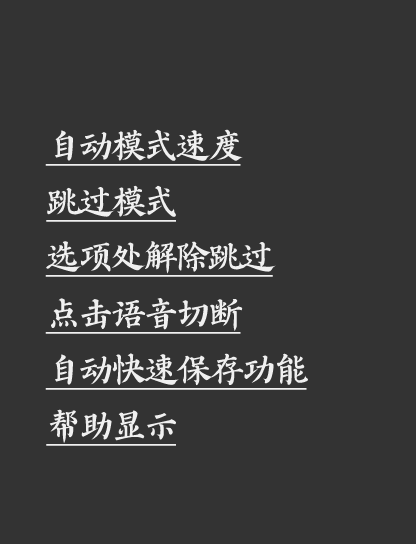
<style>
.page{position:relative;width:416px;height:544px;background:#333333}
.page>*{position:absolute;margin:0}
.t1{font:36px "AaYZQDBTBNon-CommercialUse";letter-spacing:-0.1em;color:#f0f0f0;text-decoration:underline}
</style>
<div class="page">
<p class="t1" style="left:45px;top:129px;width:198px;height:37px">自动模式速度</p>
<p class="t1" style="left:46px;top:185px;width:130px;height:37px">跳过模式</p>
<p class="t1" style="left:45px;top:241px;width:231px;height:36px">选项处解除跳过</p>
<p class="t1" style="left:45px;top:298px;width:198px;height:36px">点击语音切断</p>
<p class="t1" style="left:45px;top:353px;width:263px;height:37px">自动快速保存功能</p>
<p class="t1" style="left:46px;top:409px;width:130px;height:37px">帮助显示</p>
</div>
